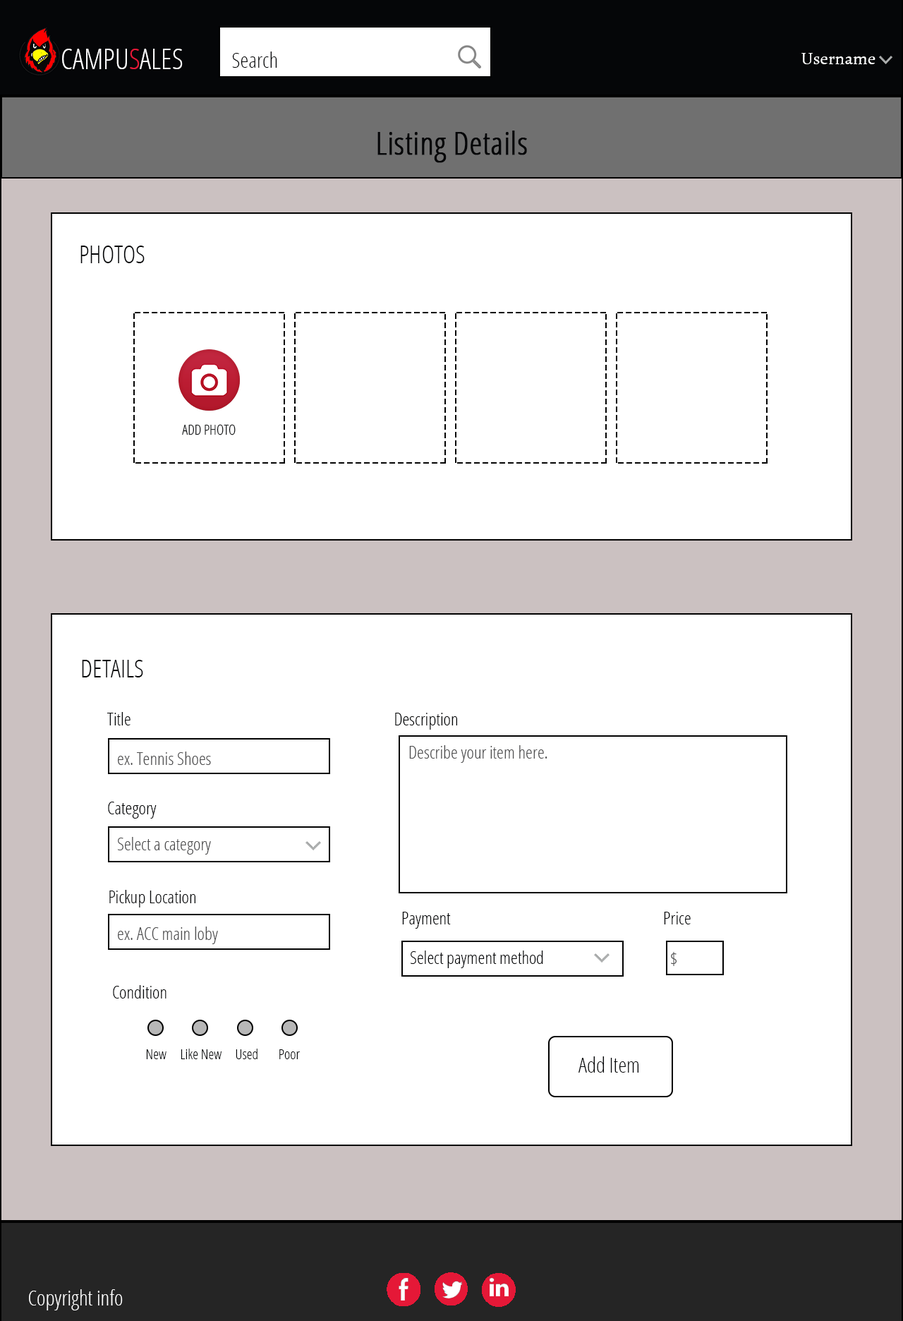
<style>
.page{position:relative;width:903px;height:1321px;background:#ffffff}
.page>*{position:absolute;margin:0}
.t1{font:28.2px "OpenSans-CondensedLight";color:#fefeff;text-transform:uppercase}
.t2{font:28.2px "OpenSans-CondensedLight";color:#e51837;text-transform:uppercase}
.t3{font:21.2px "OpenSans-CondensedLight";color:#050608}
.t4{font:17.6px "Alegreya-Regular";color:#ffffff}
.t5{font:31.7px "OpenSans-CondensedLight";color:#050608;font-weight:bold}
.t6{font:24.7px "OpenSans-CondensedLight";color:#050608;text-transform:uppercase}
.t7{font:13.9px "OpenSans-CondensedLight";color:#050608;text-transform:uppercase}
.t8{font:17.6px "OpenSans-CondensedLight";color:#050608}
.t9{font:17.6px "OpenSans-CondensedLight";color:#4f4f50}
.t10{font:14.1px "OpenSans-CondensedLight";color:#050608}
.t11{font:21.2px "OpenSans-CondensedLight";color:#ffffff}
</style>
<div class="page">
<p class="t1" style="left:62px;top:49px;width:121px;height:20px">Campu<span class="t2">s</span>ales</p>
<p class="t3" style="left:232px;top:51px;width:45px;height:17px">Search</p>
<p class="t4" style="left:801px;top:53px;width:74px;height:12px">Username</p>
<p class="t5" style="left:377px;top:131px;width:150px;height:32px">Listing Details</p>
<p class="t6" style="left:80px;top:245px;width:65px;height:18px">photos</p>
<p class="t7" style="left:182px;top:424px;width:54px;height:11px">Add photo</p>
<p class="t6" style="left:82px;top:660px;width:61px;height:17px">Details</p>
<p class="t8" style="left:107px;top:712px;width:24px;height:13px">Title</p>
<p class="t8" style="left:395px;top:712px;width:62px;height:17px">Description</p>
<p class="t9" style="left:409px;top:745px;width:138px;height:18px">Describe your item here.</p>
<p class="t9" style="left:118px;top:751px;width:93px;height:14px">ex. Tennis Shoes</p>
<p class="t8" style="left:108px;top:801px;width:49px;height:17px">Category</p>
<p class="t9" style="left:117px;top:837px;width:94px;height:17px">Select a category</p>
<p class="t8" style="left:109px;top:890px;width:86px;height:17px">Pickup Location</p>
<p class="t8" style="left:402px;top:911px;width:49px;height:17px">Payment</p>
<p class="t8" style="left:664px;top:911px;width:27px;height:13px">Price</p>
<p class="t9" style="left:118px;top:926px;width:100px;height:18px">ex. ACC main loby</p>
<p class="t8" style="left:410px;top:950px;width:133px;height:18px">Select payment method</p>
<p class="t9" style="left:671px;top:952px;width:6px;height:14px">$</p>
<p class="t8" style="left:113px;top:985px;width:53px;height:13px">Condition</p>
<p class="t10" style="left:146px;top:1049px;width:20px;height:10px">New</p>
<p class="t10" style="left:181px;top:1048px;width:41px;height:11px">Like New</p>
<p class="t10" style="left:236px;top:1048px;width:21px;height:11px">Used</p>
<p class="t10" style="left:279px;top:1049px;width:21px;height:10px">Poor</p>
<p class="t3" style="left:578px;top:1056px;width:61px;height:16px">Add Item</p>
<p class="t11" style="left:29px;top:1289px;width:94px;height:21px">Copyright info</p>
</div>
